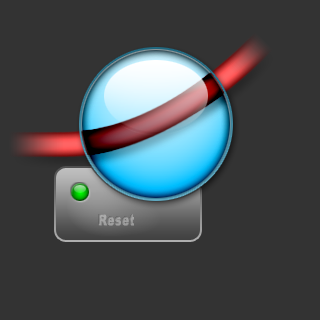
<style>
.page{position:relative;width:320px;height:320px;background:#333333}
.page>*{position:absolute;margin:0}
.t1{font:15.4px "Arial-Black";color:#9f9f9f;font-weight:bold;scale:0.71 1}
</style>
<div class="page">
<p class="t1" style="left:98px;top:214px;width:36px;height:12px">Reset</p>
</div>
